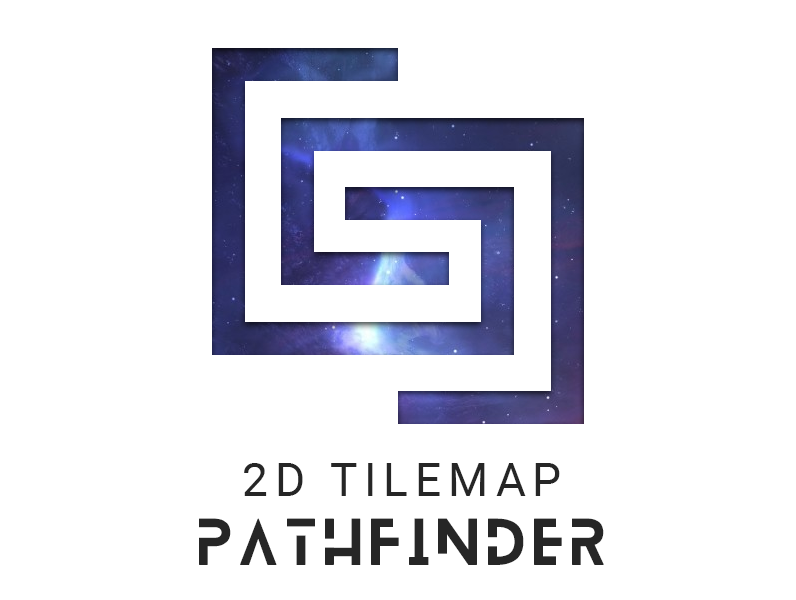
<style>
.page{position:relative;width:796px;height:600px;background:#ffffff}
.page>*{position:absolute;margin:0}
.t1{font:46px "Roboto-Regular";letter-spacing:0.15em;color:#262626}
.t2{font:58px "Blanka-Regular";letter-spacing:0.15em;color:#262626}
</style>
<div class="page">
<p class="t1" style="left:199px;top:463px;width:405px;height:102px;text-align:center">2D TILEMAP<br><span class="t2">PATHFINDER</span></p>
</div>
